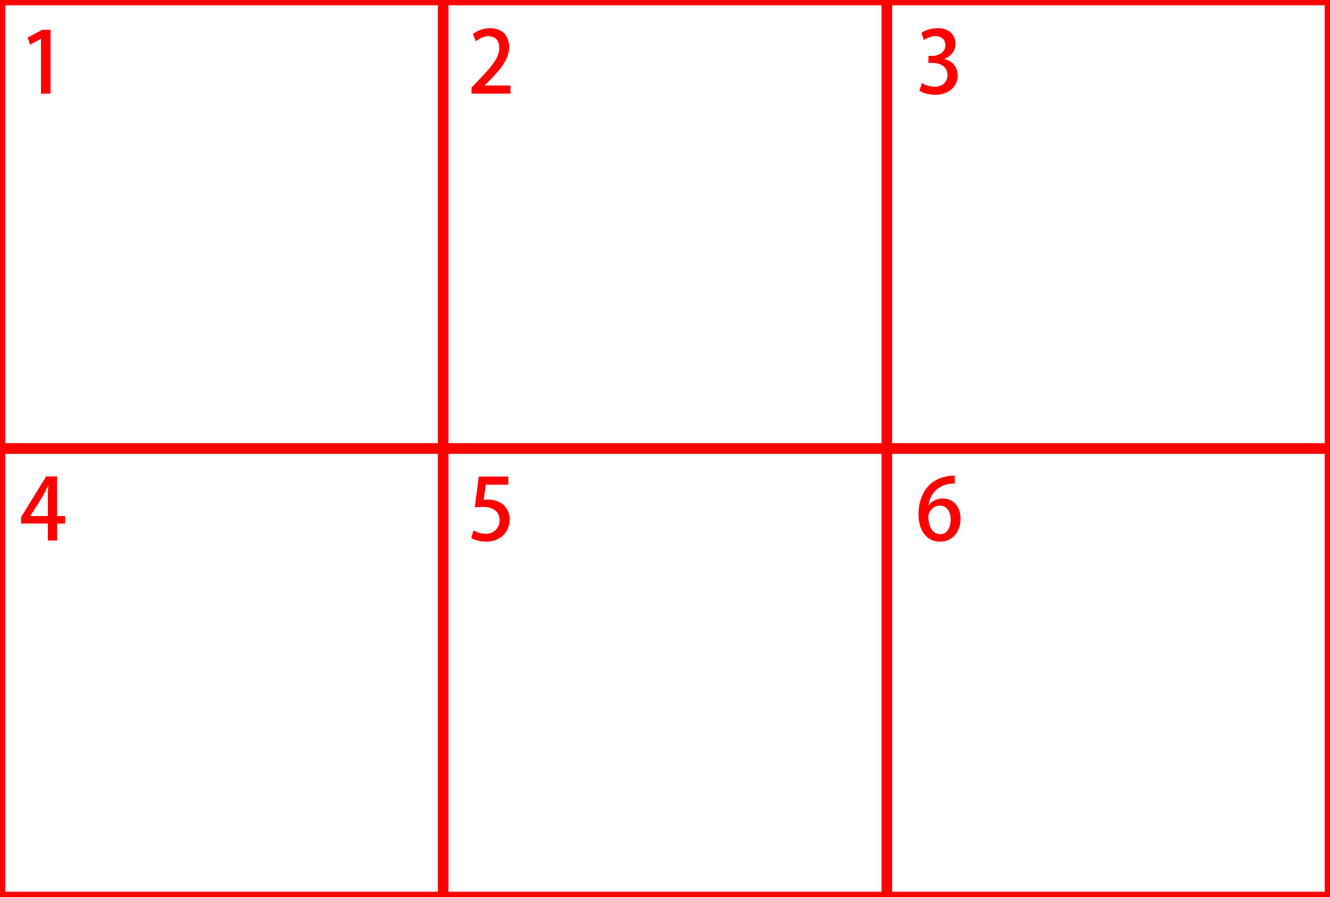
<style>
.page{position:relative;width:1330px;height:897px;background:#ffffff}
.page>*{position:absolute;margin:0}
.t1{font:85.1px "AdobeFanHeitiStd-Bold";color:#ff0000}
</style>
<div class="page">
<p class="t1" style="left:21px;top:28px;width:940px;height:514px">1                     2                     3<br><br><br>4                     5                     6</p>
</div>
